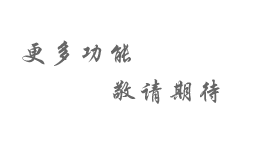
<style>
.page{position:relative;width:259px;height:160px;background:#ffffff}
.page>*{position:absolute;margin:0}
.t1{font:45.1px "STXingkai";letter-spacing:0.1em;color:#666666;font-variant:small-caps}
</style>
<div class="page">
<p class="t1" style="left:22px;top:40px;width:109px;height:26px">更多功能</p>
<p class="t1" style="left:112px;top:79px;width:108px;height:25px">敬请期待</p>
</div>
